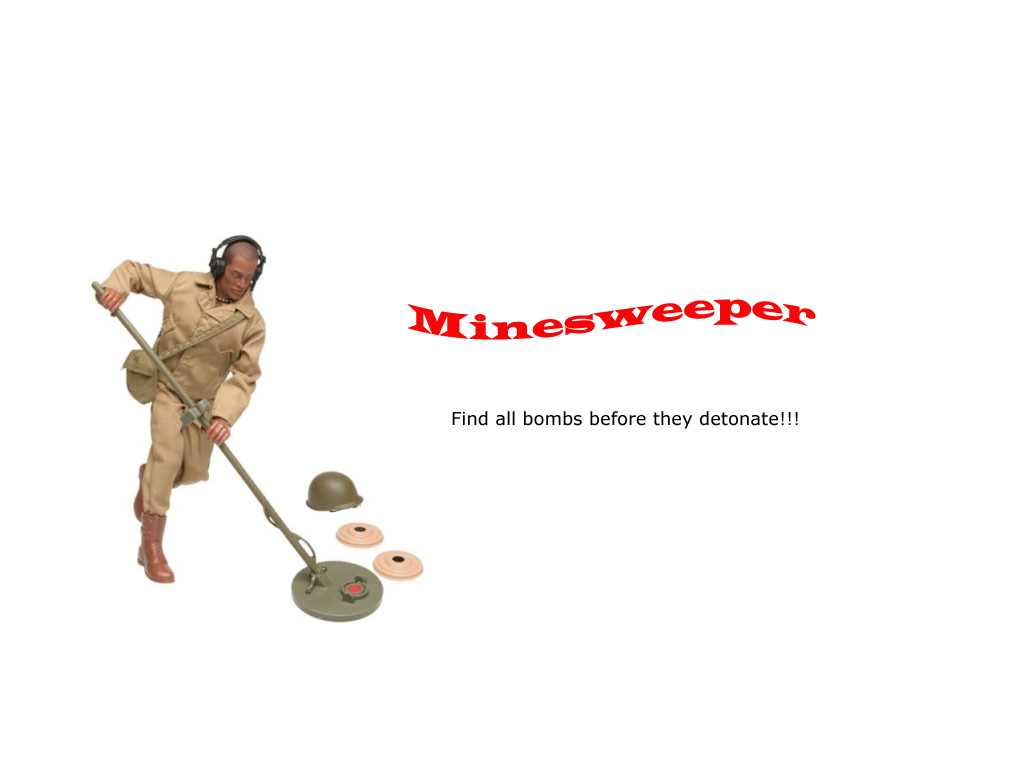
<style>
.page{position:relative;width:1024px;height:768px;background:#ffffff}
.page>*{position:absolute;margin:0}
.t1{font:36px "LatinWide";color:#f60606}
.t2{font:18px "Verdana";color:#000000}
</style>
<div class="page">
<p class="t1" style="left:407px;top:299px;width:409px;height:41px">Minesweeper</p>
<p class="t2" style="left:452px;top:411px;width:346px;height:18px">Find all bombs before they detonate!!!</p>
</div>
